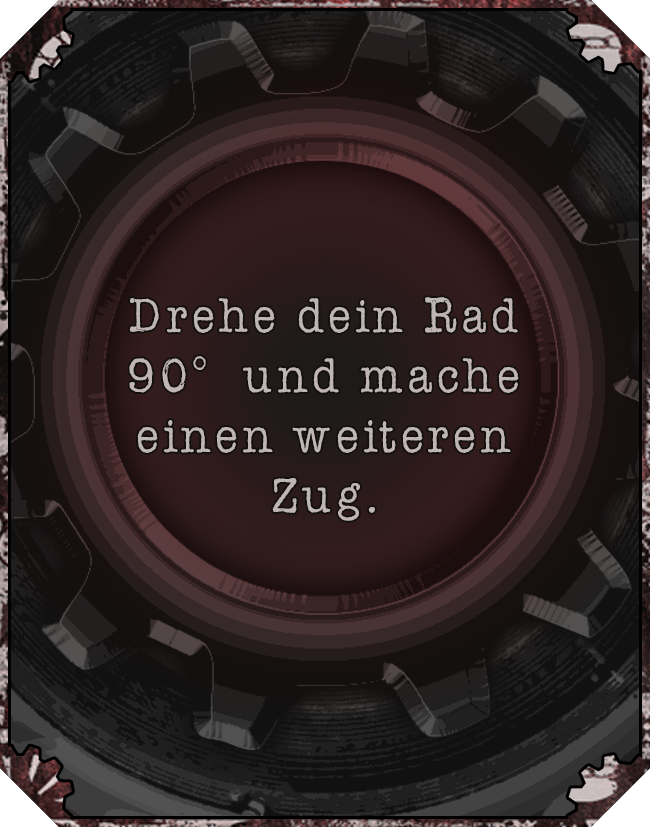
<style>
.page{position:relative;width:650px;height:827px}
.page>*{position:absolute;margin:0}
.t1{font:50px "AmerTypewriterITCbyBT-Medium";letter-spacing:0.02em;color:#c0b5b5}
</style>
<div class="page">
<p class="t1" style="left:129px;top:297px;width:390px;height:224px;text-align:center">Drehe dein Rad 90°  und mache einen weiteren Zug.</p>
</div>
